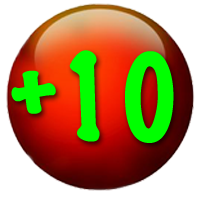
<style>
.page{position:relative;width:200px;height:200px;background:#ffffff}
.page>*{position:absolute;margin:0}
.t1{font:108.3px "MarkerFelt-Thin";color:#00ff00}
</style>
<div class="page">
<p class="t1" style="left:11px;top:50px;width:163px;height:93px">+10</p>
</div>
